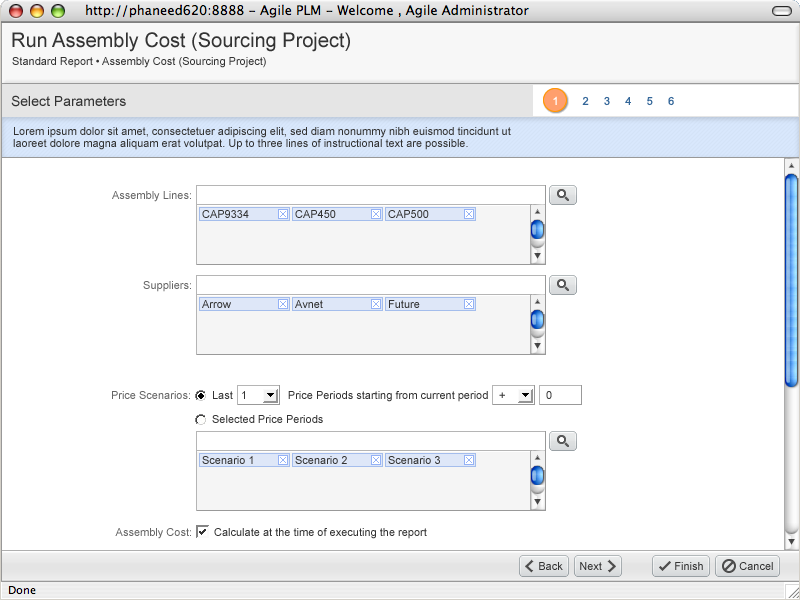
<style>
.page{position:relative;width:800px;height:600px;background:#ffffff}
.page>*{position:absolute;margin:0}
.t1{font:20px "ArialMT";color:#333333}
.t2{font:11px "ArialMT";color:#333333}
.t3{font:14px "ArialMT";color:#333333}
.t4{font:11px "ArialMT";color:#ffffff}
.t5{font:11px "ArialMT";color:#336699}
.t6{font:11px/12px "ArialMT";color:#333333}
.t7{font:11px "ArialMT";color:#666666}
</style>
<div class="page">
<p class="t1" style="left:12px;top:32px;width:338px;height:20px">Run Assembly Cost (Sourcing Project)</p>
<p class="t2" style="left:12px;top:57px;width:254px;height:11px">Standard Report • Assembly Cost (Sourcing Project)</p>
<p class="t3" style="left:11px;top:95px;width:115px;height:12px">Select Parameters</p>
<p class="t4" style="left:553px;top:96px;width:4px;height:9px">1</p>
<p class="t5" style="left:582px;top:96px;width:92px;height:10px">2     3     4     5     6</p>
<p class="t6" style="left:13px;top:127px;width:498px;height:23px">Lorem ipsum dolor sit amet, consectetuer adipiscing elit, sed diam nonummy nibh euismod tincidunt ut <br>laoreet dolore magna aliquam erat volutpat. Up to three lines of instructional text are possible.</p>
<p class="t7" style="left:112px;top:191px;width:79px;height:11px">Assembly Lines:</p>
<p class="t2" style="left:202px;top:210px;width:47px;height:8px">CAP9334</p>
<p class="t2" style="left:295px;top:210px;width:41px;height:8px">CAP450</p>
<p class="t2" style="left:388px;top:210px;width:41px;height:8px">CAP500</p>
<p class="t7" style="left:143px;top:281px;width:48px;height:11px">Suppliers:</p>
<p class="t2" style="left:202px;top:300px;width:29px;height:8px">Arrow</p>
<p class="t2" style="left:295px;top:300px;width:28px;height:8px">Avnet</p>
<p class="t2" style="left:389px;top:300px;width:31px;height:8px">Future</p>
<p class="t7" style="left:112px;top:391px;width:78px;height:8px">Price Scenarios:</p>
<p class="t2" style="left:213px;top:391px;width:275px;height:11px">Last                  Price Periods starting from current period</p>
<p class="t2" style="left:242px;top:391px;width:3px;height:8px">1</p>
<p class="t2" style="left:499px;top:392px;width:6px;height:6px">+</p>
<p class="t2" style="left:546px;top:391px;width:6px;height:8px">0</p>
<p class="t2" style="left:212px;top:415px;width:111px;height:8px">Selected Price Periods</p>
<p class="t2" style="left:202px;top:456px;width:51px;height:8px">Scenario 1</p>
<p class="t2" style="left:295px;top:456px;width:52px;height:8px">Scenario 2</p>
<p class="t2" style="left:388px;top:456px;width:52px;height:8px">Scenario 3</p>
<p class="t7" style="left:115px;top:528px;width:76px;height:11px">Assembly Cost:</p>
<p class="t2" style="left:214px;top:528px;width:213px;height:11px">Calculate at the time of executing the report</p>
<p class="t2" style="left:539px;top:562px;width:24px;height:8px">Back</p>
<p class="t2" style="left:580px;top:562px;width:22px;height:8px">Next</p>
<p class="t2" style="left:675px;top:562px;width:28px;height:8px">Finish</p>
<p class="t2" style="left:739px;top:562px;width:34px;height:8px">Cancel</p>
</div>
